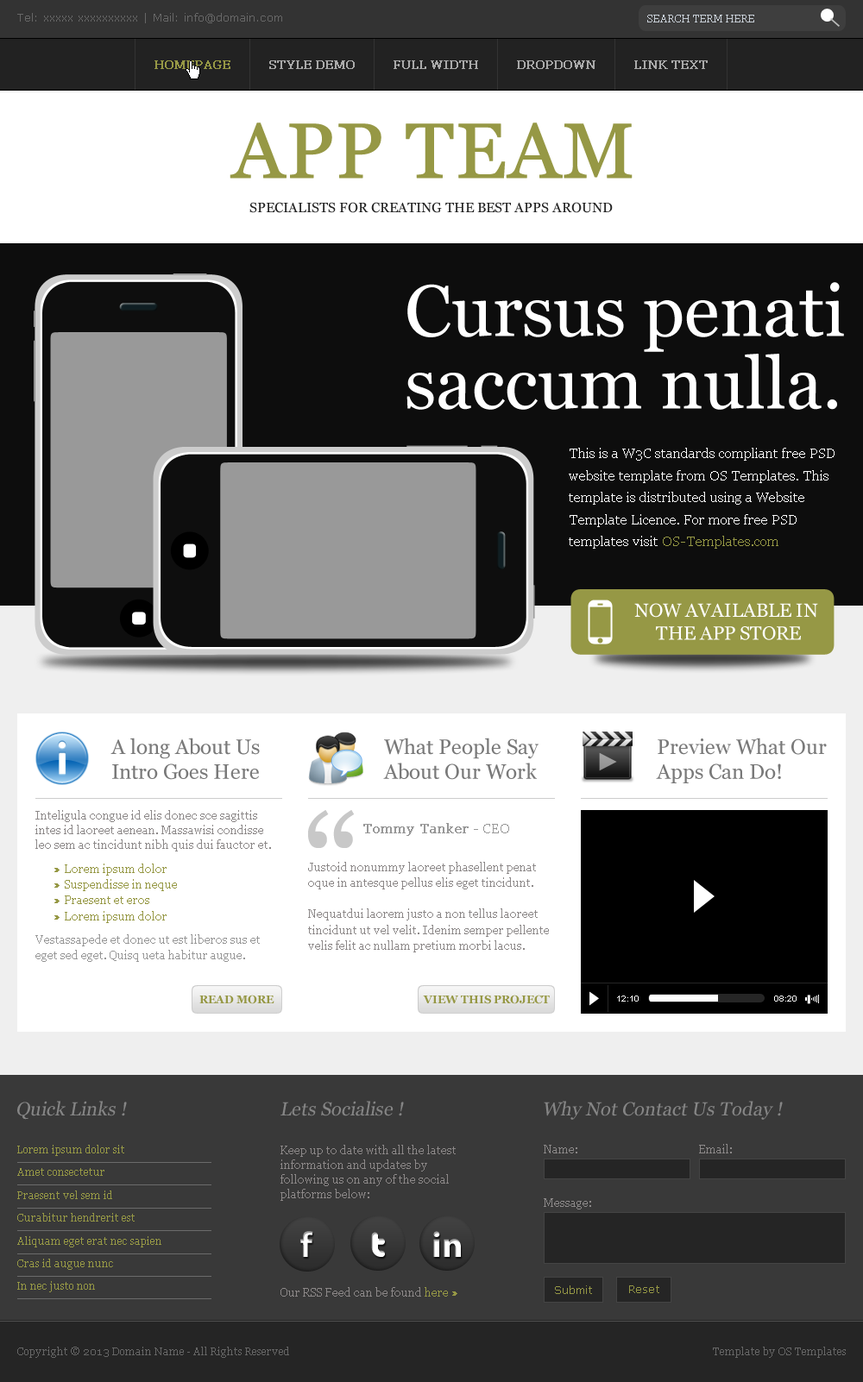
<style>
.page{position:relative;width:863px;height:1382px;background:#ffffff}
.page>*{position:absolute;margin:0}
.t1{font:11.2px "Verdana";color:#676767}
.t2{font:10.4px "Georgia";color:#c7ced6}
.t3{font:12.1px "Georgia";color:#969845;font-weight:bold}
.t4{font:12.1px "Georgia";color:#aaaaaa;font-weight:bold}
.t5{font:77.6px "Georgia";color:#969845;font-weight:bold}
.t6{font:13.8px "Georgia";color:#242424}
.t7{font:72.5px/72.5px "Georgia";color:#ffffff}
.t8{font:13.8px/22.1px "Georgia";color:#ffffff}
.t9{font:13.8px/22.1px "Georgia";color:#969845}
.t10{font:19px/22.8px "Georgia";color:#ffffff}
.t11{font:20.7px/24.8px "Georgia";color:#797979}
.t12{font:11.2px/14.6px "Georgia";color:#8c8888}
.t13{font:13.8px "Georgia";color:#989898;font-weight:bold}
.t14{font:13.8px "Georgia";color:#989898}
.t15{font:11.2px/15.7px "Georgia";color:#969845}
.t16{font:11.2px/11.2px "Georgia";color:#969845;font-weight:bold}
.t17{font:11.2px/15.7px "Georgia";color:#8c8888}
.t18{font:11.2px/15.7px "Georgia";color:#979797}
.t19{font:11.2px "Georgia-Bold";color:#969845}
.t20{font:8.6px "ArialMT";color:#ffffff}
.t21{font:19px "Georgia";color:#858585;font-style:italic}
.t22{font:10.4px/22.8px "Georgia";color:#969845}
.t23{font:11.2px "Georgia";color:#8c8989}
.t24{font:36.2px "KlavikaMedium-OSF";color:#ffffff}
.t25{font:36.2px "PicoBlackAl";color:#ffffff}
.t26{font:36.2px "MyriadPro-Bold";color:#ffffff}
.t27{font:11.2px "Georgia";color:#8c8888}
.t28{font:11.2px "Georgia";color:#969845}
.t29{font:11.2px "Georgia";color:#969845;font-weight:bold}
.t30{font:11.2px "Verdana";color:#969845}
.t31{font:10.4px "Georgia";color:#666666}
</style>
<div class="page">
<p class="t1" style="left:17px;top:13px;width:265px;height:10px">Tel: xxxxx xxxxxxxxxx | Mail: info@domain.com</p>
<p class="t2" style="left:647px;top:15px;width:107px;height:7px">SEARCH TERM HERE</p>
<p class="t3" style="left:154px;top:60px;width:76px;height:9px">HOMEPAGE</p>
<p class="t4" style="left:269px;top:60px;width:86px;height:9px">STYLE DEMO</p>
<p class="t4" style="left:393px;top:60px;width:85px;height:9px">FULL WIDTH</p>
<p class="t4" style="left:517px;top:60px;width:78px;height:9px">DROPDOWN</p>
<p class="t4" style="left:634px;top:60px;width:73px;height:9px">LINK TEXT</p>
<p class="t5" style="left:229px;top:123px;width:403px;height:56px">APP TEAM</p>
<p class="t6" style="left:249px;top:202px;width:364px;height:11px">SPECIALISTS FOR CREATING THE BEST APPS AROUND</p>
<p class="t7" style="left:406px;top:282px;width:438px;height:128px">Cursus penati saccum nulla.</p>
<p class="t8" style="left:569px;top:448px;width:265px;height:101px">This is a W3C standards compliant free PSD website template from OS Templates. This template is distributed using a Website Template Licence. For more free PSD templates visit <span class="t9">OS-Templates.com</span></p>
<p class="t10" style="left:634px;top:603px;width:184px;height:37px;text-align:center">NOW AVAILABLE IN <br>THE APP STORE</p>
<p class="t11" style="left:110px;top:738px;width:150px;height:42px">A long About Us<br>Intro Goes Here</p>
<p class="t11" style="left:383px;top:738px;width:155px;height:42px">What People Say<br>About Our Work</p>
<p class="t11" style="left:656px;top:738px;width:171px;height:45px">Preview What Our<br>Apps Can Do!</p>
<p class="t12" style="left:35px;top:810px;width:236px;height:42px">Inteligula congue id elis donec sce sagittis intes id laoreet aenean. Massawisi condisse leo sem ac tincidunt nibh quis dui fauctor et.</p>
<p class="t13" style="left:363px;top:823px;width:146px;height:13px">Tommy Tanker<span class="t14"> - CEO</span></p>
<p class="t15" style="left:54px;top:864px;width:123px;height:59px"><span class="t16">» </span>Lorem ipsum dolor<br><span class="t16">» </span>Suspendisse in neque<br><span class="t16">» </span>Praesent et eros<br><span class="t16">» </span>Lorem ipsum dolor</p>
<p class="t17" style="left:308px;top:862px;width:241px;height:90px">Justoid nonummy laoreet phasellent penat oque in antesque pellus elis eget tincidunt.<br><br>Nequatdui laorem justo a non tellus laoreet tincidunt ut vel velit. Idenim semper pellente velis felit ac nullam pretium morbi lacus.</p>
<p class="t18" style="left:35px;top:934px;width:225px;height:28px">Vestassapede et donec ut est liberos sus et eget sed eget. Quisq ueta habitur augue.</p>
<p class="t19" style="left:199px;top:995px;width:75px;height:9px">READ MORE</p>
<p class="t19" style="left:423px;top:995px;width:127px;height:9px">VIEW THIS PROJECT</p>
<p class="t20" style="left:617px;top:996px;width:21px;height:6px">12:10</p>
<p class="t20" style="left:774px;top:996px;width:22px;height:6px">08:20</p>
<p class="t21" style="left:17px;top:1101px;width:110px;height:19px">Quick Links !</p>
<p class="t21" style="left:280px;top:1101px;width:124px;height:15px">Lets Socialise !</p>
<p class="t21" style="left:544px;top:1101px;width:239px;height:19px">Why Not Contact Us Today !</p>
<p class="t22" style="left:17px;top:1145px;width:144px;height:147px;text-align:justify">Lorem ipsum dolor sit<br>Amet consectetur<br>Praesent vel sem id<br>Curabitur hendrerit est<br>Aliquam eget erat nec sapien<br>Cras id augue nunc<br>In nec justo non</p>
<p class="t12" style="left:280px;top:1145px;width:176px;height:56px">Keep up to date with all the latest information and updates by following us on any of the social platforms below:</p>
<p class="t23" style="left:544px;top:1145px;width:33px;height:8px">Name:</p>
<p class="t23" style="left:699px;top:1144px;width:33px;height:9px">Email:</p>
<p class="t23" style="left:544px;top:1198px;width:47px;height:12px">Message:</p>
<p class="t24" style="left:300px;top:1231px;width:13px;height:26px">f</p>
<p class="t25" style="left:371px;top:1232px;width:14px;height:25px">t</p>
<p class="t26" style="left:433px;top:1231px;width:28px;height:26px">in</p>
<p class="t27" style="left:280px;top:1287px;width:177px;height:10px">Our RSS Feed can be found <span class="t28">here </span><span class="t29">»</span></p>
<p class="t30" style="left:555px;top:1285px;width:37px;height:9px">Submit</p>
<p class="t30" style="left:629px;top:1285px;width:30px;height:8px">Reset</p>
<p class="t31" style="left:17px;top:1347px;width:272px;height:11px">Copyright © 2013 Domain Name - All Rights Reserved</p>
<p class="t31" style="left:713px;top:1347px;width:132px;height:11px">Template by OS Templates</p>
</div>
